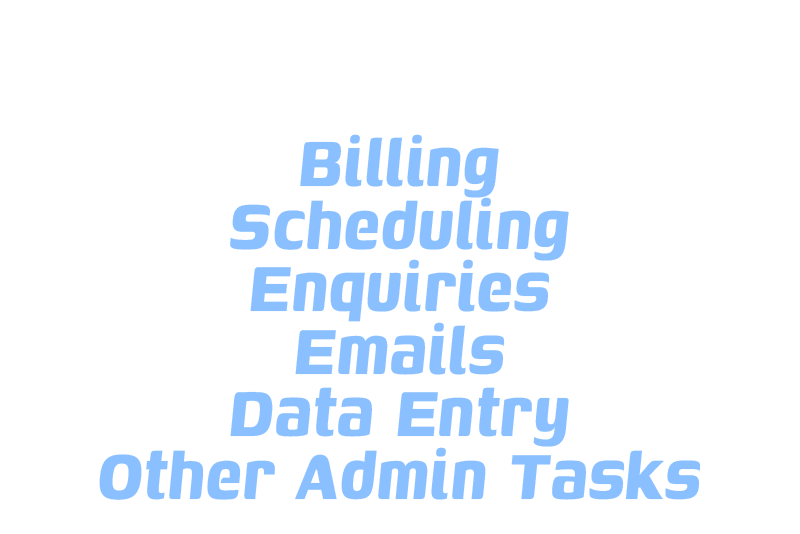
<style>
.page{position:relative;width:800px;height:534px;background:#ffffff}
.page>*{position:absolute;margin:0}
.t1{font:95.3px/62.5px "GenosItalic_765.000wght";letter-spacing:0.02em;color:#8ac0ff;font-weight:bold;scale:0.7 1}
</style>
<div class="page">
<p class="t1" style="left:99px;top:134px;width:602px;height:366px;text-align:center">Billing<br>Scheduling<br>Enquiries<br>Emails<br>Data Entry<br>Other Admin Tasks</p>
</div>
